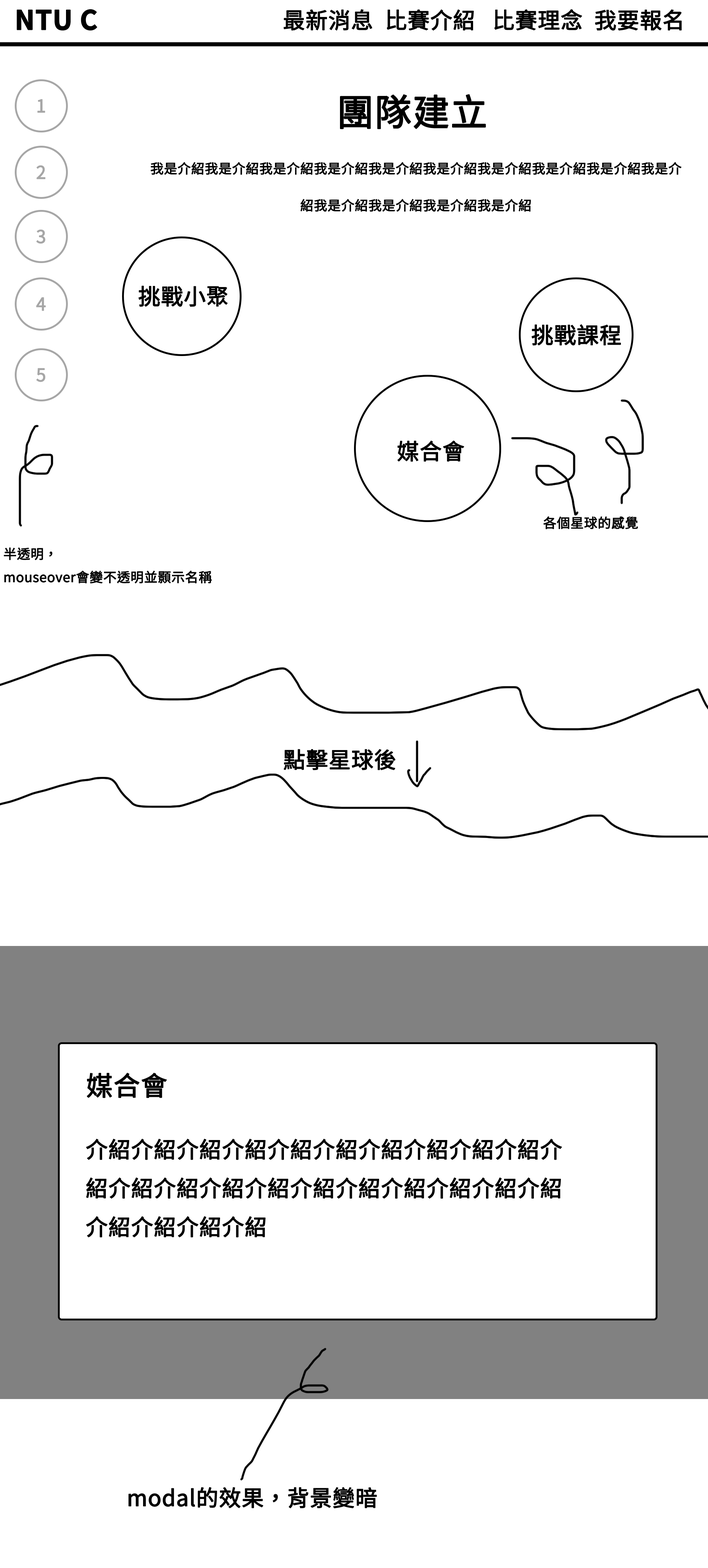
<style>
.page{position:relative;width:708px;height:1568px;background:#ffffff}
.page>*{position:absolute;margin:0}
.t1{font:26.6px "NotoSansCJKtc-Bold";color:#000000;font-weight:bold}
.t2{font:22.1px "NotoSansCJKtc-Regular";color:#000000;font-weight:bold}
.t3{font:17.7px "NotoSansCJKtc-Regular";color:#a6a6a6;font-weight:bold}
.t4{font:36.9px "NotoSansCJKtc-Regular";color:#000000;font-weight:bold}
.t5{font:13.3px/36.9px "NotoSansCJKtc-Regular";color:#000000;font-weight:bold}
.t6{font:13.3px "NotoSansCJKtc-Regular";color:#000000;font-weight:bold}
.t7{font:26.6px "NotoSansCJKtc-Regular";color:#000000;font-weight:bold}
</style>
<div class="page">
<p class="t1" style="left:17px;top:9px;width:80px;height:22px">NTU C</p>
<p class="t2" style="left:284px;top:9px;width:398px;height:22px">最新消息  比賽介紹   比賽理念  我要報名</p>
<p class="t3" style="left:37px;top:99px;width:8px;height:14px">1</p>
<p class="t4" style="left:340px;top:94px;width:146px;height:35px">團隊建立</p>
<p class="t5" style="left:151px;top:162px;width:531px;height:50px;text-align:center">我是介紹我是介紹我是介紹我是介紹我是介紹我是介紹我是介紹我是介紹我是介紹我是介紹我是介紹我是介紹我是介紹我是介紹</p>
<p class="t3" style="left:37px;top:165px;width:8px;height:14px">2</p>
<p class="t3" style="left:36px;top:229px;width:9px;height:15px">3</p>
<p class="t2" style="left:138px;top:286px;width:90px;height:21px">挑戰小聚</p>
<p class="t3" style="left:36px;top:297px;width:10px;height:14px">4</p>
<p class="t2" style="left:532px;top:324px;width:89px;height:22px">挑戰課程</p>
<p class="t3" style="left:36px;top:368px;width:9px;height:14px">5</p>
<p class="t2" style="left:398px;top:441px;width:66px;height:21px">媒合會</p>
<p class="t6" style="left:543px;top:516px;width:95px;height:13px">各個星球的感覺</p>
<p class="t6" style="left:4px;top:548px;width:208px;height:36px">半透明，<br>mouseover會變不透明並顥示名稱</p>
<p class="t2" style="left:284px;top:749px;width:112px;height:21px">點擊星球後</p>
<p class="t7" style="left:87px;top:1073px;width:80px;height:25px">媒合會</p>
<p class="t2" style="left:86px;top:1139px;width:476px;height:98px">介紹介紹介紹介紹介紹介紹介紹介紹介紹介紹介紹介紹介紹介紹介紹介紹介紹介紹介紹介紹介紹介紹介紹介紹介紹</p>
<p class="t2" style="left:128px;top:1487px;width:249px;height:22px">modal的效果，背景變暗</p>
</div>
